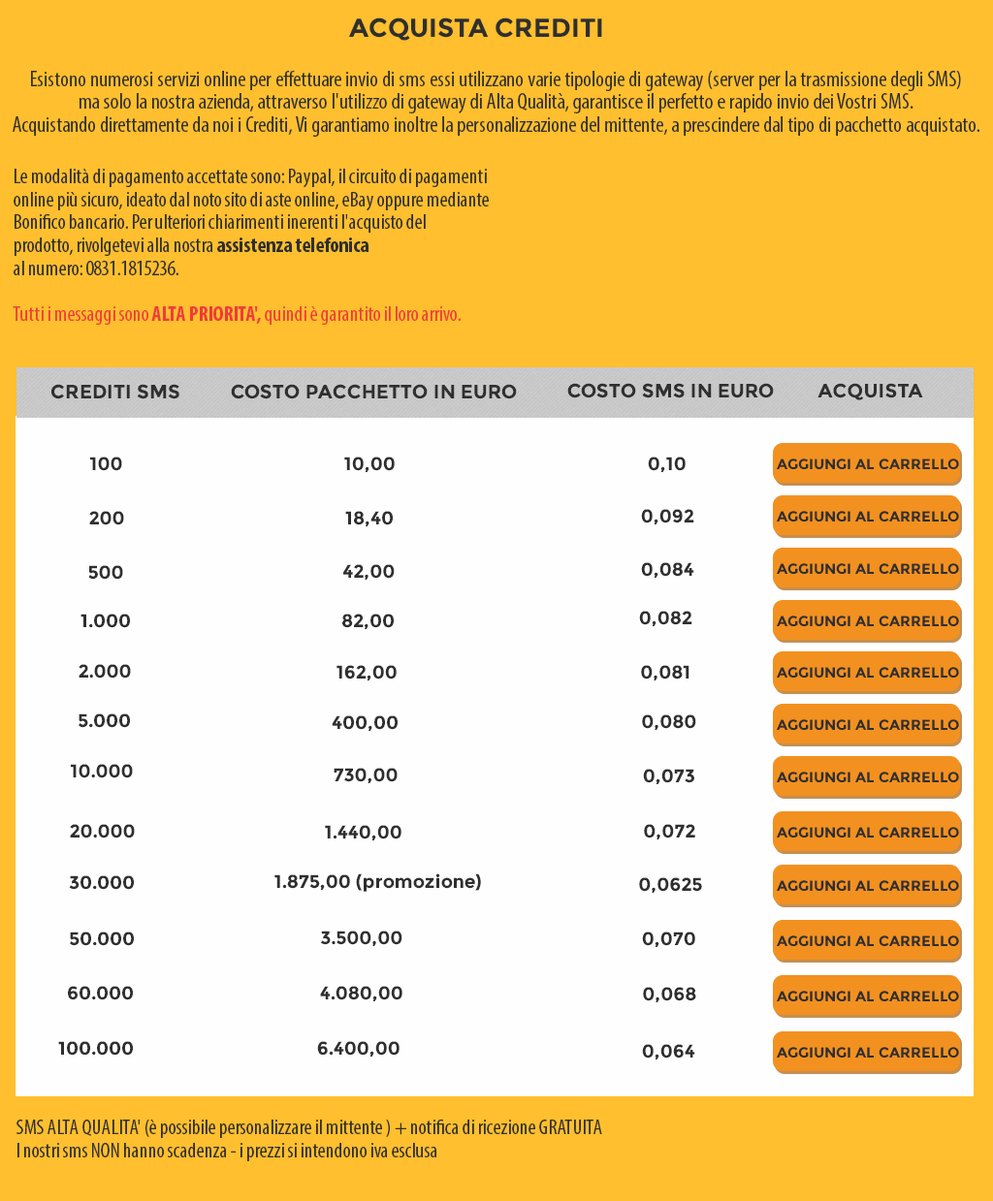
<style>
.page{position:relative;width:993px;height:1201px;background:#fffefe}
.page>*{position:absolute;margin:0}
.t1{font:26.2px "Montserrat-Bold";color:#2f2f2f}
.t2{font:22.3px/22.9px "MyriadPro-Cond";color:#2f2f2f}
.t3{font:21.3px/22.9px "MyriadPro-Cond";color:#2f2f2f}
.t4{font:21.3px/22.9px "MyriadPro-BoldCond";color:#2f2f2f}
.t5{font:21.3px/22.9px "MyriadPro-Cond";color:#f03b3b}
.t6{font:21.3px/22.9px "MyriadPro-BoldCond";color:#f03b3b}
.t7{font:19.4px "Montserrat-Bold";color:#2f2f2f}
.t8{font:18.4px "Montserrat-Bold";color:#2f2f2f}
.t9{font:14.5px "Montserrat-Bold";color:#2f2f2f}
</style>
<div class="page">
<p class="t1" style="left:348px;top:17px;width:254px;height:24px">ACQUISTA CREDITI</p>
<p class="t2" style="left:13px;top:71px;width:966px;height:66px;text-align:center">Esistono numerosi servizi online per effettuare invio di sms essi utilizzano varie tipologie di gateway (server per la trasmissione degli SMS)<br>ma solo la nostra azienda, attraverso l'utilizzo di gateway di Alta Qualità, garantisce il perfetto e rapido invio dei Vostri SMS.<br>Acquistando direttamente da noi i Crediti, Vi garantiamo inoltre la personalizzazione del mittente, a prescindere dal tipo di pacchetto acquistato.</p>
<p class="t3" style="left:13px;top:169px;width:476px;height:156px">Le modalità di pagamento accettate sono: Paypal, il circuito di pagamenti<br>online più sicuro, ideato dal noto sito di aste online, eBay oppure mediante<br>Bonifico bancario. Per ulteriori chiarimenti inerenti l'acquisto del<br>prodotto, rivolgetevi alla nostra <span class="t4">assistenza telefonica<br></span>al numero: 0831.1815236. <br><br><span class="t5">Tutti i messaggi sono </span><span class="t6">ALTA PRIORITA',</span><span class="t5"> quindi è garantito il loro arrivo.</span></p>
<p class="t7" style="left:51px;top:384px;width:128px;height:15px">CREDITI SMS</p>
<p class="t7" style="left:231px;top:384px;width:286px;height:15px">COSTO PACCHETTO IN EURO</p>
<p class="t7" style="left:567px;top:383px;width:207px;height:15px">COSTO SMS IN EURO</p>
<p class="t7" style="left:817px;top:383px;width:106px;height:17px">ACQUISTA</p>
<p class="t8" style="left:90px;top:457px;width:32px;height:14px">100</p>
<p class="t8" style="left:344px;top:457px;width:51px;height:15px">10,00</p>
<p class="t8" style="left:648px;top:457px;width:37px;height:15px">0,10</p>
<p class="t9" style="left:777px;top:459px;width:182px;height:10px">AGGIUNGI AL CARRELLO</p>
<p class="t8" style="left:641px;top:509px;width:53px;height:15px">0,092</p>
<p class="t8" style="left:89px;top:511px;width:35px;height:14px">200</p>
<p class="t8" style="left:345px;top:511px;width:48px;height:15px">18,40</p>
<p class="t9" style="left:777px;top:511px;width:182px;height:11px">AGGIUNGI AL CARRELLO</p>
<p class="t8" style="left:88px;top:565px;width:35px;height:15px">500</p>
<p class="t8" style="left:343px;top:564px;width:52px;height:16px">42,00</p>
<p class="t8" style="left:641px;top:562px;width:53px;height:16px">0,084</p>
<p class="t9" style="left:777px;top:563px;width:182px;height:11px">AGGIUNGI AL CARRELLO</p>
<p class="t8" style="left:80px;top:614px;width:50px;height:14px">1.000</p>
<p class="t8" style="left:342px;top:614px;width:52px;height:15px">82,00</p>
<p class="t8" style="left:639px;top:611px;width:53px;height:15px">0,082</p>
<p class="t9" style="left:777px;top:616px;width:182px;height:10px">AGGIUNGI AL CARRELLO</p>
<p class="t8" style="left:79px;top:664px;width:52px;height:15px">2.000</p>
<p class="t8" style="left:336px;top:665px;width:61px;height:16px">162,00</p>
<p class="t8" style="left:641px;top:665px;width:48px;height:16px">0,081</p>
<p class="t9" style="left:777px;top:667px;width:182px;height:11px">AGGIUNGI AL CARRELLO</p>
<p class="t8" style="left:79px;top:714px;width:51px;height:14px">5.000</p>
<p class="t8" style="left:332px;top:715px;width:65px;height:16px">400,00</p>
<p class="t8" style="left:642px;top:714px;width:54px;height:16px">0,080</p>
<p class="t9" style="left:777px;top:719px;width:182px;height:11px">AGGIUNGI AL CARRELLO</p>
<p class="t8" style="left:71px;top:764px;width:62px;height:14px">10.000</p>
<p class="t8" style="left:333px;top:768px;width:64px;height:15px">730,00</p>
<p class="t8" style="left:643px;top:769px;width:51px;height:15px">0,073</p>
<p class="t9" style="left:777px;top:772px;width:182px;height:10px">AGGIUNGI AL CARRELLO</p>
<p class="t8" style="left:70px;top:824px;width:65px;height:15px">20.000</p>
<p class="t8" style="left:325px;top:825px;width:76px;height:16px">1.440,00</p>
<p class="t8" style="left:644px;top:824px;width:51px;height:16px">0,072</p>
<p class="t9" style="left:777px;top:827px;width:182px;height:11px">AGGIUNGI AL CARRELLO</p>
<p class="t8" style="left:69px;top:875px;width:65px;height:15px">30.000</p>
<p class="t8" style="left:274px;top:873px;width:207px;height:19px">1.875,00 (promozione)</p>
<p class="t8" style="left:639px;top:877px;width:63px;height:16px">0,0625</p>
<p class="t9" style="left:777px;top:880px;width:182px;height:11px">AGGIUNGI AL CARRELLO</p>
<p class="t8" style="left:70px;top:932px;width:64px;height:14px">50.000</p>
<p class="t8" style="left:321px;top:931px;width:81px;height:15px">3.500,00</p>
<p class="t8" style="left:642px;top:932px;width:53px;height:15px">0,070</p>
<p class="t9" style="left:777px;top:936px;width:182px;height:10px">AGGIUNGI AL CARRELLO</p>
<p class="t8" style="left:68px;top:986px;width:65px;height:14px">60.000</p>
<p class="t8" style="left:320px;top:986px;width:82px;height:15px">4.080,00</p>
<p class="t8" style="left:643px;top:987px;width:53px;height:15px">0,068</p>
<p class="t9" style="left:777px;top:991px;width:182px;height:10px">AGGIUNGI AL CARRELLO</p>
<p class="t8" style="left:58px;top:1041px;width:75px;height:15px">100.000</p>
<p class="t8" style="left:317px;top:1041px;width:82px;height:16px">6.400,00</p>
<p class="t8" style="left:642px;top:1044px;width:53px;height:16px">0,064</p>
<p class="t9" style="left:777px;top:1047px;width:182px;height:11px">AGGIUNGI AL CARRELLO</p>
<p class="t3" style="left:16px;top:1120px;width:586px;height:41px">SMS ALTA QUALITA' (è possibile personalizzare il mittente ) + notifica di ricezione GRATUITA<br>I nostri sms NON hanno scadenza - i prezzi si intendono iva esclusa</p>
</div>
